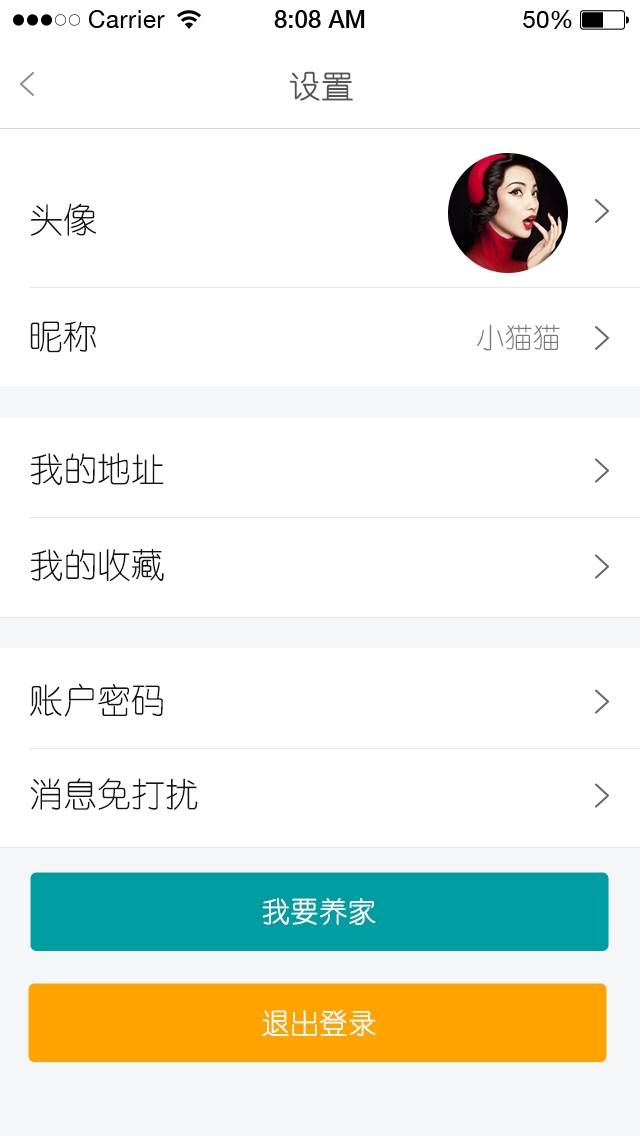
<style>
.page{position:relative;width:640px;height:1136px;background:#ffffff}
.page>*{position:absolute;margin:0}
.t1{font:32px "YouYuan";color:#555555;text-transform:uppercase;font-weight:bold}
.t2{font:34px "YouYuan";color:#121414}
.t3{font:28px "YouYuan";color:#797979}
.t4{font:34.1px "YouYuan";color:#121414}
.t5{font:28px "YouYuan";color:#ffffff;font-weight:bold}
</style>
<div class="page">
<p class="t1" style="left:289px;top:71px;width:64px;height:30px">设置</p>
<p class="t2" style="left:30px;top:203px;width:66px;height:33px">头像</p>
<p class="t2" style="left:30px;top:321px;width:66px;height:32px">昵称</p>
<p class="t3" style="left:477px;top:324px;width:83px;height:27px">小猫猫</p>
<p class="t4" style="left:30px;top:452px;width:134px;height:33px">我的地址</p>
<p class="t4" style="left:30px;top:548px;width:134px;height:34px">我的收藏</p>
<p class="t4" style="left:30px;top:683px;width:133px;height:34px">账户密码</p>
<p class="t4" style="left:30px;top:777px;width:168px;height:33px">消息免打扰</p>
<p class="t5" style="left:262px;top:898px;width:114px;height:27px">我要养家</p>
<p class="t5" style="left:262px;top:1009px;width:114px;height:27px">退出登录</p>
</div>
